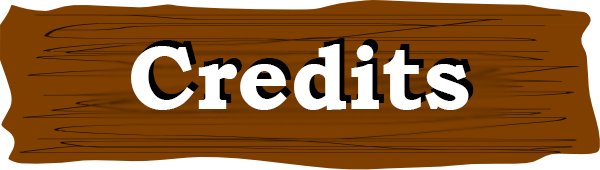
<style>
.page{position:relative;width:600px;height:170px;background:#7f3f00}
.page>*{position:absolute;margin:0}
.t1{font:91.1px "BookmanOldStyle-Bold"}
.t2{font:91.1px "BookmanOldStyle-Bold";color:#ffffff}
</style>
<div class="page">
<p class="t1" style="left:136px;top:38px;width:338px;height:66px">Credits</p>
<p class="t2" style="left:131px;top:44px;width:338px;height:66px">Credits</p>
</div>
